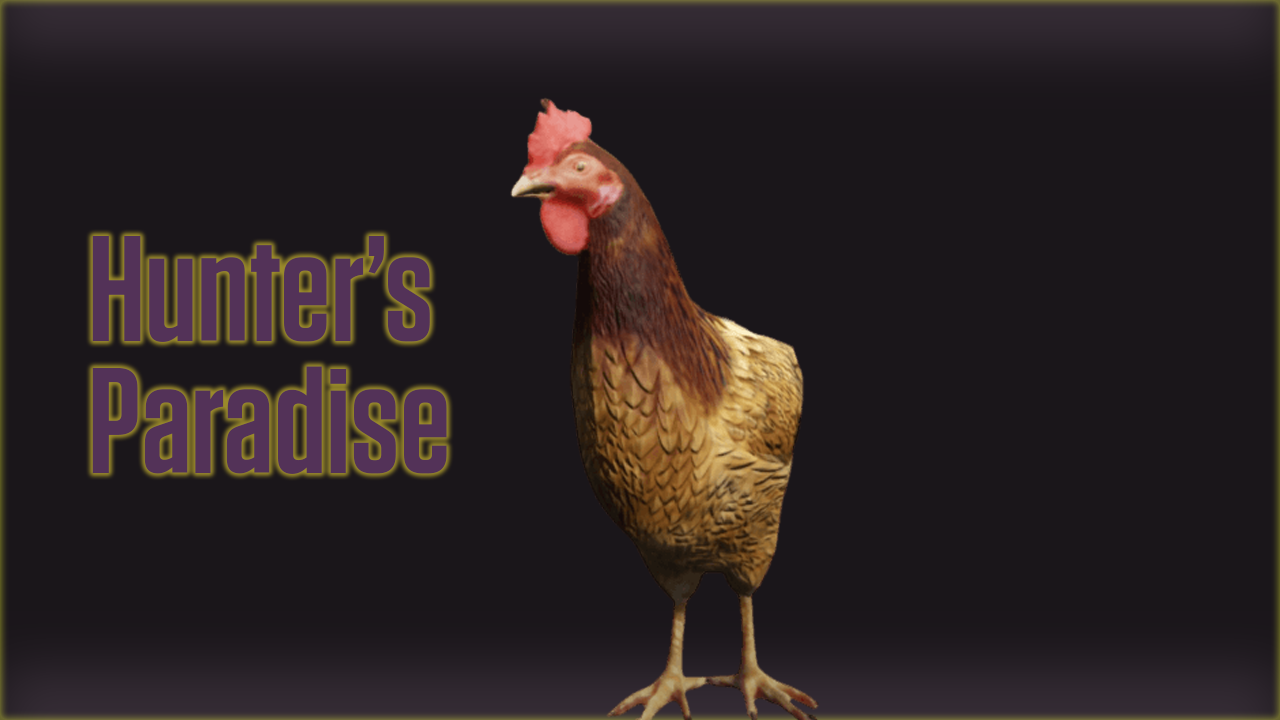
<style>
.page{position:relative;width:1280px;height:720px;background:#1a161a}
.page>*{position:absolute;margin:0}
.t1{font:150px/32.9px "Tungsten-Semibold";color:#533258}
</style>
<div class="page">
<p class="t1" style="left:92px;top:236px;width:355px;height:238px">Hunter’s<br><br><br><br>Paradise</p>
</div>
